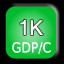
<style>
.page{position:relative;width:64px;height:64px;background:#000000}
.page>*{position:absolute;margin:0}
.t1{font:19.6px "Kartika";color:#ffffff}
.t2{font:13.8px "DejaVuSansCondensed";color:#ffffff}
</style>
<div class="page">
<p class="t1" style="left:20px;top:20px;width:23px;height:15px">1K</p>
<p class="t2" style="left:12px;top:42px;width:39px;height:12px">GDP/C</p>
</div>
